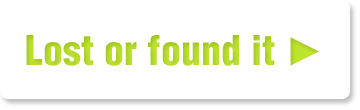
<style>
.page{position:relative;width:360px;height:110px;background:#ffffff}
.page>*{position:absolute;margin:0}
.t1{font:40px "HelveticaLTStd-BlkCond";color:#bee52d}
.t2{font:40px "ArialMT";color:#bee52d}
</style>
<div class="page">
<p class="t1" style="left:26px;top:35px;width:293px;height:31px">Lost or found it <span class="t2">►</span></p>
</div>
